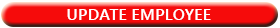
<style>
.page{position:relative;width:280px;height:28px;background:#f60b0b}
.page>*{position:absolute;margin:0}
.t1{font:16.4px "YuGothicUI-Bold";color:#ffffff}
</style>
<div class="page">
<p class="t1" style="left:67px;top:9px;width:144px;height:11px">UPDATE EMPLOYEE</p>
</div>
